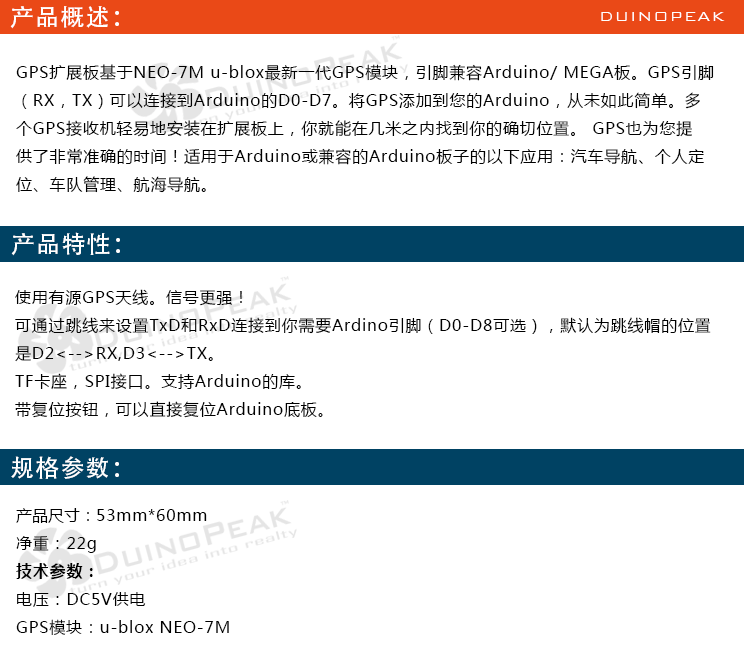
<style>
.page{position:relative;width:744px;height:666px;background:#ffffff}
.page>*{position:absolute;margin:0}
.t1{font:24px "AdobeHeitiStd-Regular";letter-spacing:0.05em;color:#ffffff}
.t2{font:18px "BankGothicBT-Light";letter-spacing:0.05em;color:#ffffff}
.t3{font:16px "MicrosoftYaHei";letter-spacing:0.05em;color:#000000}
.t4{font:16px "MicrosoftYaHei";color:#000000}
.t5{font:16px "MicrosoftYaHei-Bold";letter-spacing:0.05em;color:#000000}
</style>
<div class="page">
<p class="t1" style="left:10px;top:6px;width:109px;height:23px">产品概述：</p>
<p class="t2" style="left:601px;top:12px;width:124px;height:9px">DUINOPEAK</p>
<p class="t3" style="left:16px;top:64px;width:698px;height:129px">GPS扩展板基于NEO-7M u-blox最新一代GPS模块，引脚兼容Arduino/ MEGA板。GPS引脚<br>（RX，TX）可以连接到Arduino的D0-D7。将GPS添加到您的Arduino，从未如此简单。多<br>个GPS接收机轻易地安装在扩展板上，你就能在几米之内找到你的确切位置。 GPS也为您提<br>供了非常准确的时间！适用于Arduino或兼容的Arduino板子的以下应用：汽车导航、个人定<br>位、车队管理、航海导航。</p>
<p class="t1" style="left:11px;top:232px;width:109px;height:24px">产品特性：</p>
<p class="t3" style="left:15px;top:289px;width:696px;height:129px">使用有源GPS天线。信号更强！<br>可通过跳线来设置TxD和RxD连接到你需要Ardino引脚（D0-D8可选），默认为跳线帽的位置<br>是D2&lt;--&gt;RX,D3&lt;--&gt;TX。<br>TF卡座，SPI接口。支持Arduino的库。<br>带复位按钮，可以直接复位Arduino底板。</p>
<p class="t1" style="left:11px;top:456px;width:108px;height:23px">规格参数：</p>
<p class="t3" style="left:16px;top:508px;width:213px;height:127px"><span class="t4">产品尺寸：</span>53mm*60mm<br>净重：22g<br><span class="t5">技术参数：<br></span>电压：DC5V供电<br>GPS模块：u-blox NEO-7M</p>
</div>
